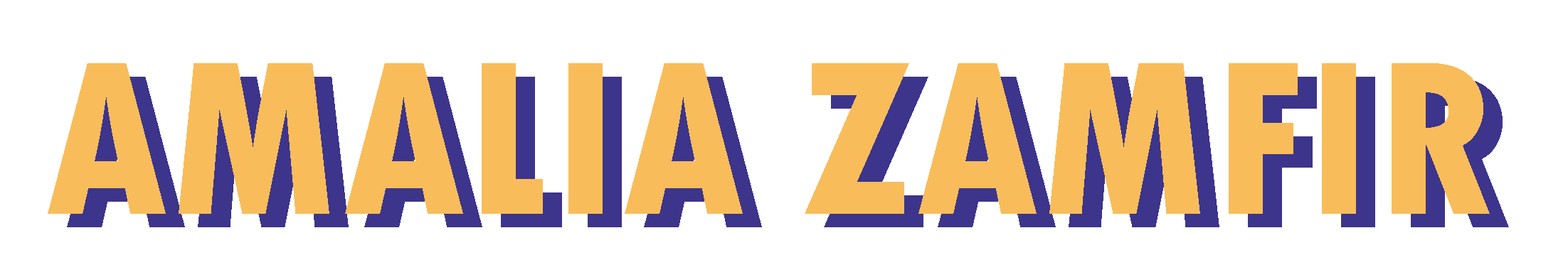
<style>
.page{position:relative;width:1568px;height:277px;background:#ffffff}
.page>*{position:absolute;margin:0}
.t1{font:231.3px "TwCenMT-CondensedExtraBold";letter-spacing:0.005em;color:#f8bd5a}
</style>
<div class="page">
<p class="t1" style="left:48px;top:63px;width:1442px;height:151px">AMALIA ZAMFIR</p>
</div>
